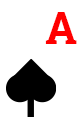
<style>
.page{position:relative;width:80px;height:123px;background:#ffffff}
.page>*{position:absolute;margin:0}
.t1{font:45px "RobotoSlab-Bold";letter-spacing:0.2em;color:#ff0000}
</style>
<div class="page">
<p class="t1" style="left:45px;top:12px;width:32px;height:32px">A</p>
</div>
